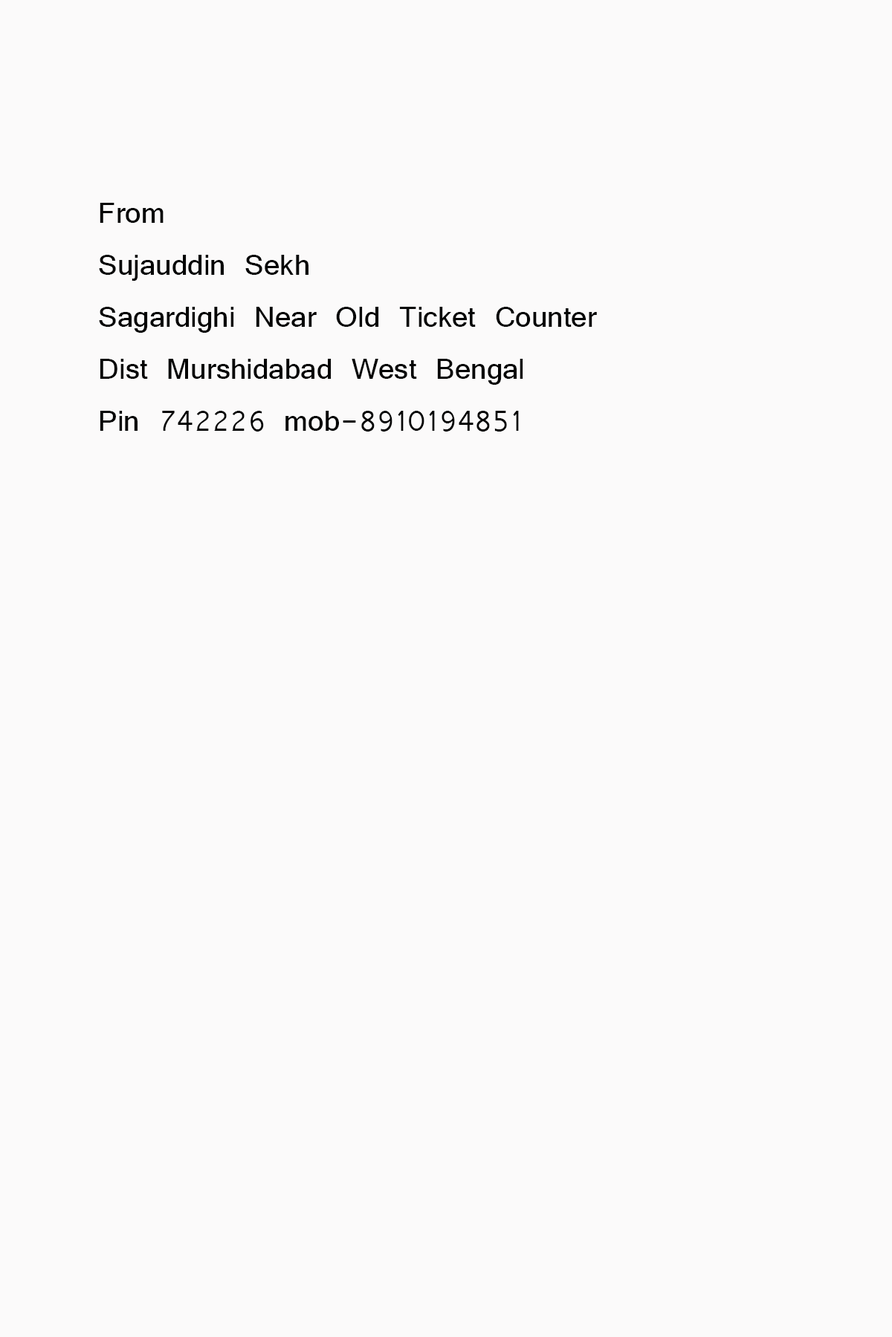
<style>
.page{position:relative;width:892px;height:1337px;background:#fbfafa}
.page>*{position:absolute;margin:0}
.t1{font:43.3px "Vrinda";color:#040404}
</style>
<div class="page">
<p class="t1" style="left:99px;top:203px;width:498px;height:229px">From<br>Sujauddin Sekh<br>Sagardighi Near Old Ticket Counter<br>Dist Murshidabad West Bengal<br>Pin 742226 mob-8910194851</p>
</div>
